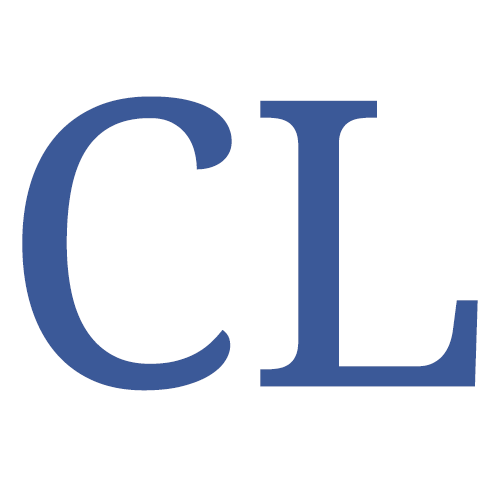
<style>
.page{position:relative;width:500px;height:500px;background:#ffffff}
.page>*{position:absolute;margin:0}
.t1{font:400px "DroidSerif";color:#3b5998}
</style>
<div class="page">
<p class="t1" style="left:22px;top:96px;width:456px;height:295px">CL</p>
</div>
